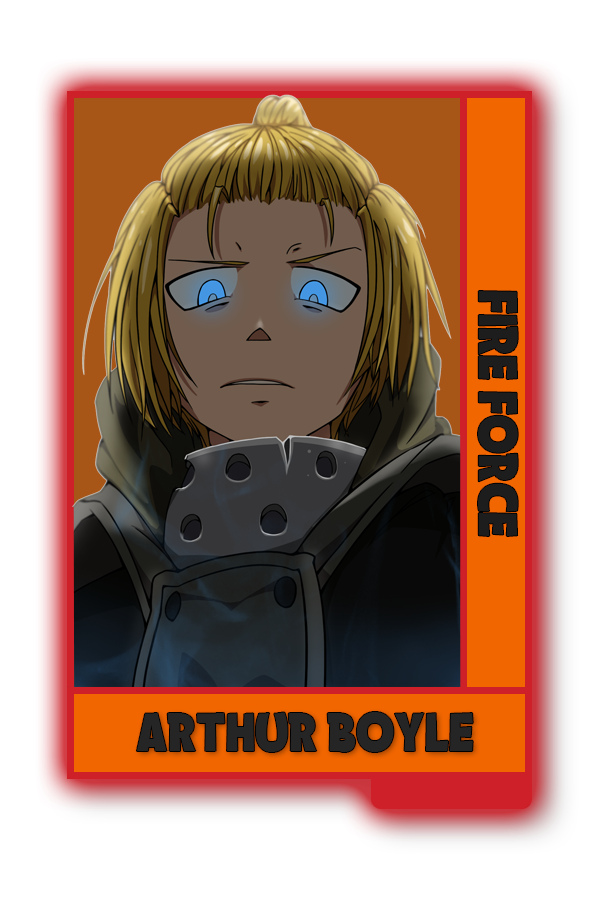
<style>
.page{position:relative;width:600px;height:900px;background:#ffffff}
.page>*{position:absolute;margin:0}
.t1{font:69.6px "AristonComicDemo-Regular";color:#1d1d1d}
.t2{font:69.1px "AristonComicDemo-Regular";color:#252525}
</style>
<div class="page">
<p class="t1" style="left:478px;top:291px;width:40px;height:245px;rotate:90deg">FIRE FORCE</p>
<p class="t2" style="left:136px;top:712px;width:337px;height:40px">ARTHUR BOYLE</p>
</div>
